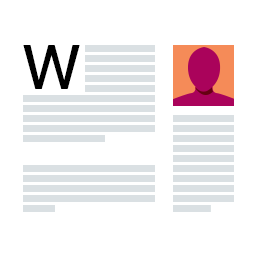
<style>
.page{position:relative;width:256px;height:256px;background:#ffffff}
.page>*{position:absolute;margin:0}
.t1{font:107px "SFUIDisplay-Medium";color:#000000}
</style>
<div class="page">
<p class="t1" style="left:23px;top:45px;width:57px;height:44px">W</p>
</div>
